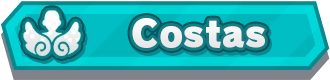
<style>
.page{position:relative;width:330px;height:80px}
.page>*{position:absolute;margin:0}
.t1{font:36px "RodinPro-UB";letter-spacing:0.014em;color:#efeff0}
</style>
<div class="page">
<p class="t1" style="left:132px;top:18px;width:133px;height:30px">Costas</p>
</div>
